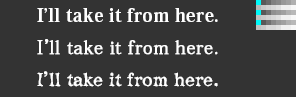
<style>
.page{position:relative;width:296px;height:97px;background:#333333}
.page>*{position:absolute;margin:0}
.t1{font:18px/32px "ComicMysteryStd-DB";letter-spacing:-0.006em;color:#ffffff}
.t2{font:18px/32px "KozMinPro-Heavy";letter-spacing:0.022em;color:#ffffff}
.t3{font:18px/32px "KozMinPro-Heavy";color:#ffffff}
.t4{font:18px/32px "AdobeFangsongStd-Regular";letter-spacing:0.028em;color:#ffffff;font-weight:bold}
.t5{font:18px/32px "AdobeFangsongStd-Regular";letter-spacing:-0.7em;color:#ffffff;font-weight:bold}
</style>
<div class="page">
<p class="t1" style="left:37px;top:8px;width:181px;height:79px"><span class="t2">I’ll take </span><span class="t3">i</span><span class="t2">t from here.<br></span><span class="t4">I</span><span class="t5">’</span><span class="t4">ll take it from here.<br></span>I’ll take it from here.</p>
</div>
